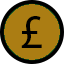
<style>
.page{position:relative;width:64px;height:64px;background:#ab7d13}
.page>*{position:absolute;margin:0}
.t1{font:48px "MyriadPro-Regular";color:#000000}
</style>
<div class="page">
<p class="t1" style="left:21px;top:16px;width:21px;height:32px">£</p>
</div>
